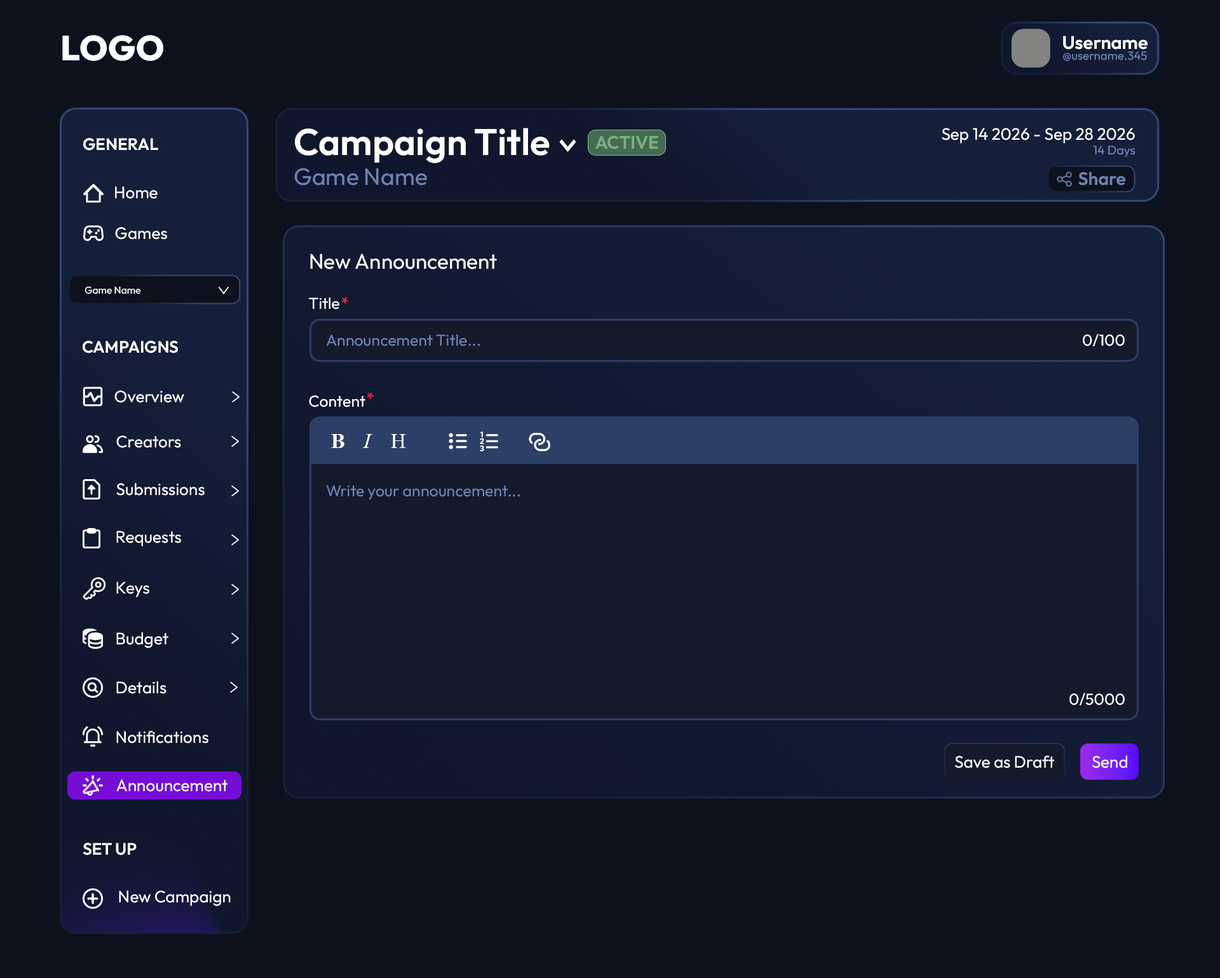
<style>
.page{position:relative;width:1220px;height:978px;background:#0d111d}
.page>*{position:absolute;margin:0}
.t1{font:34.8px "Outfit-ExtraBold";color:#ffffff}
.t2{font:18.4px "Outfit-SemiBold";color:#ffffff}
.t3{font:11.9px "Outfit-Regular";color:#6d82b1}
.t4{font:16.6px "Outfit-SemiBold";color:#ffffff}
.t5{font:37.1px "Outfit-SemiBold";color:#ffffff}
.t6{font:18px "Outfit-SemiBold";color:#78b47a}
.t7{font:16.6px "Outfit-Regular";color:#ffffff}
.t8{font:12.5px "Outfit-Regular";color:#6d82b1}
.t9{font:23.8px "Outfit-Regular";color:#6d82b1}
.t10{font:18px "Outfit-SemiBold";color:#6d82b1}
.t11{font:21.2px "Outfit-Regular";color:#ffffff}
.t12{font:10px "Outfit-Regular";color:#ffffff}
.t13{font:15.9px "Outfit-Regular";color:#ffffff}
.t14{font:15.9px "Outfit-Regular";color:#fa2f4c}
.t15{font:15.9px "Outfit-Regular";color:#6d82b1}
.t16{font:21.2px "TimesNewRomanPS-BoldMT";color:#ffffff}
.t17{font:21.2px "TimesNewRomanPS-ItalicMT";color:#ffffff}
.t18{font:21.2px "TimesNewRomanPSMT";color:#ffffff}
</style>
<div class="page">
<p class="t1" style="left:62px;top:35px;width:101px;height:26px">LOGO</p>
<p class="t2" style="left:1063px;top:36px;width:84px;height:14px">Username</p>
<p class="t3" style="left:1063px;top:51px;width:84px;height:10px">@username.345</p>
<p class="t4" style="left:83px;top:138px;width:75px;height:13px">GENERAL</p>
<p class="t5" style="left:295px;top:128px;width:254px;height:35px">Campaign Title</p>
<p class="t6" style="left:595px;top:135px;width:63px;height:14px">ACTIVE</p>
<p class="t7" style="left:941px;top:128px;width:194px;height:16px">Sep 14 2026 - Sep 28 2026</p>
<p class="t8" style="left:1093px;top:145px;width:42px;height:13px">14 Days</p>
<p class="t9" style="left:294px;top:168px;width:133px;height:17px">Game Name</p>
<p class="t10" style="left:1078px;top:172px;width:48px;height:13px">Share</p>
<p class="t7" style="left:115px;top:186px;width:43px;height:13px">Home</p>
<p class="t7" style="left:115px;top:227px;width:52px;height:12px">Games</p>
<p class="t11" style="left:310px;top:253px;width:187px;height:16px">New Announcement</p>
<p class="t12" style="left:84px;top:286px;width:57px;height:8px">Game Name</p>
<p class="t13" style="left:309px;top:297px;width:30px;height:12px">Title</p>
<p class="t14" style="left:341px;top:297px;width:7px;height:7px">*</p>
<p class="t4" style="left:83px;top:340px;width:95px;height:13px">CAMPAIGNS</p>
<p class="t15" style="left:326px;top:334px;width:154px;height:12px">Announcement Title...</p>
<p class="t13" style="left:1082px;top:334px;width:42px;height:12px">0/100</p>
<p class="t7" style="left:114px;top:390px;width:70px;height:13px">Overview</p>
<p class="t13" style="left:309px;top:395px;width:56px;height:12px">Content</p>
<p class="t14" style="left:367px;top:392px;width:7px;height:7px">*</p>
<p class="t7" style="left:116px;top:435px;width:65px;height:13px">Creators</p>
<p class="t16" style="left:331px;top:434px;width:13px;height:14px">B</p>
<p class="t17" style="left:363px;top:434px;width:9px;height:14px">I</p>
<p class="t18" style="left:391px;top:434px;width:15px;height:14px">H</p>
<p class="t7" style="left:116px;top:483px;width:89px;height:12px">Submissions</p>
<p class="t15" style="left:326px;top:485px;width:194px;height:14px">Write your announcement...</p>
<p class="t7" style="left:116px;top:530px;width:65px;height:16px">Requests</p>
<p class="t7" style="left:116px;top:581px;width:33px;height:16px">Keys</p>
<p class="t7" style="left:116px;top:632px;width:52px;height:16px">Budget</p>
<p class="t7" style="left:116px;top:681px;width:50px;height:13px">Details</p>
<p class="t13" style="left:1069px;top:692px;width:55px;height:13px">0/5000</p>
<p class="t7" style="left:116px;top:731px;width:92px;height:12px">Notifications</p>
<p class="t7" style="left:954px;top:755px;width:100px;height:13px">Save as Draft</p>
<p class="t7" style="left:1091px;top:755px;width:36px;height:13px">Send</p>
<p class="t7" style="left:116px;top:779px;width:111px;height:13px">Announcement</p>
<p class="t4" style="left:83px;top:842px;width:54px;height:13px">SET UP</p>
<p class="t7" style="left:119px;top:890px;width:112px;height:16px">New Campaign</p>
</div>
